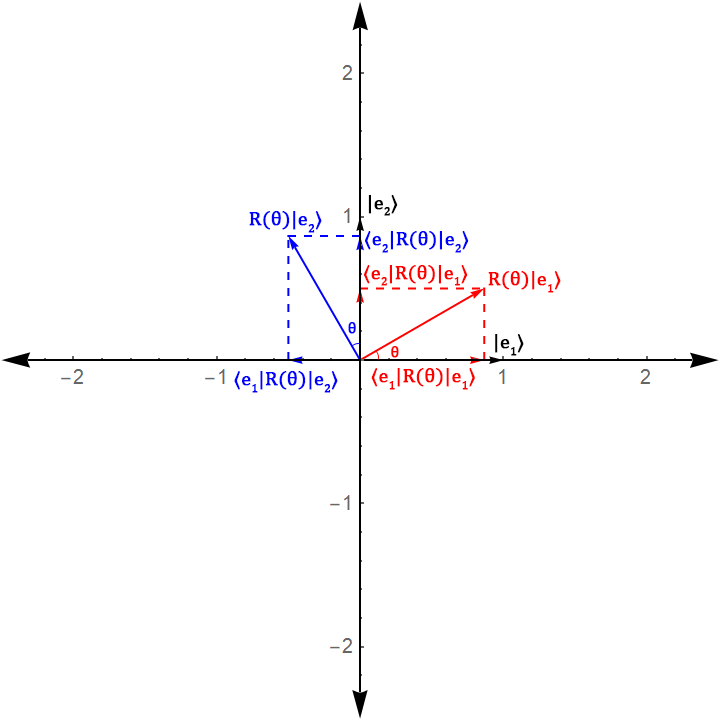
<style>
.page{position:relative;width:720px;height:720px;background:#ffffff}
.page>*{position:absolute;margin:0}
.t1{font:20px "CambriaMath";color:#000000;font-weight:bold}
.t2{font:20px "CambriaMath";color:#0000ff;font-weight:bold}
.t3{font:20px "CambriaMath";color:#ff0000;font-weight:bold}
.t4{font:16px "CambriaMath";color:#0000ff;font-weight:bold}
.t5{font:16px "CambriaMath";color:#fe0000;font-weight:bold}
</style>
<div class="page">
<p class="t1" style="left:368px;top:195px;width:30px;height:21px">|e2〉</p>
<p class="t2" style="left:249px;top:211px;width:73px;height:22px">R(θ)|e2〉</p>
<p class="t2" style="left:365px;top:231px;width:104px;height:22px">〈e2|R(θ)|e2〉</p>
<p class="t3" style="left:364px;top:265px;width:104px;height:21px">〈e2|R(θ)|e1〉</p>
<p class="t3" style="left:488px;top:271px;width:73px;height:22px">R(θ)|e1〉</p>
<p class="t4" style="left:348px;top:322px;width:8px;height:12px">θ</p>
<p class="t1" style="left:495px;top:334px;width:29px;height:22px">|e1〉</p>
<p class="t5" style="left:391px;top:346px;width:8px;height:12px">θ</p>
<p class="t2" style="left:234px;top:371px;width:104px;height:22px">〈e1|R(θ)|e2〉</p>
<p class="t3" style="left:371px;top:368px;width:104px;height:22px">〈e1|R(θ)|e1〉</p>
</div>
